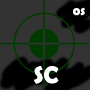
<style>
.page{position:relative;width:90px;height:90px;background:#333333}
.page>*{position:absolute;margin:0}
.t1{font:14px "BerlinSansFBDemi-Bold";color:#feffff}
.t2{font:24px "BerlinSansFBDemi-Bold";color:#feffff}
</style>
<div class="page">
<p class="t1" style="left:73px;top:7px;width:12px;height:9px">os</p>
<p class="t2" style="left:34px;top:66px;width:25px;height:18px">SC</p>
</div>
